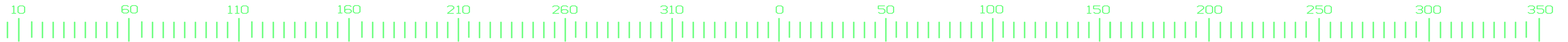
<style>
.page{position:relative;width:1568px;height:42px;background:#ffffff}
.page>*{position:absolute;margin:0}
.t1{font:12px "HornetDisplay-Bold";color:#67ff7b;scale:1.37 1}
</style>
<div class="page">
<p class="t1" style="left:12px;top:5px;width:13px;height:9px">10</p>
<p class="t1" style="left:121px;top:5px;width:17px;height:9px">60</p>
<p class="t1" style="left:228px;top:5px;width:21px;height:9px">110</p>
<p class="t1" style="left:338px;top:5px;width:23px;height:9px">160</p>
<p class="t1" style="left:447px;top:5px;width:23px;height:9px">210</p>
<p class="t1" style="left:552px;top:5px;width:26px;height:9px">260</p>
<p class="t1" style="left:660px;top:5px;width:24px;height:9px">310</p>
<p class="t1" style="left:776px;top:5px;width:8px;height:9px">0</p>
<p class="t1" style="left:878px;top:5px;width:16px;height:9px">50</p>
<p class="t1" style="left:980px;top:5px;width:23px;height:9px">100</p>
<p class="t1" style="left:1087px;top:5px;width:23px;height:9px">150</p>
<p class="t1" style="left:1197px;top:5px;width:25px;height:9px">200</p>
<p class="t1" style="left:1306px;top:5px;width:26px;height:9px">250</p>
<p class="t1" style="left:1415px;top:5px;width:26px;height:9px">300</p>
<p class="t1" style="left:1527px;top:5px;width:26px;height:9px">350</p>
</div>
